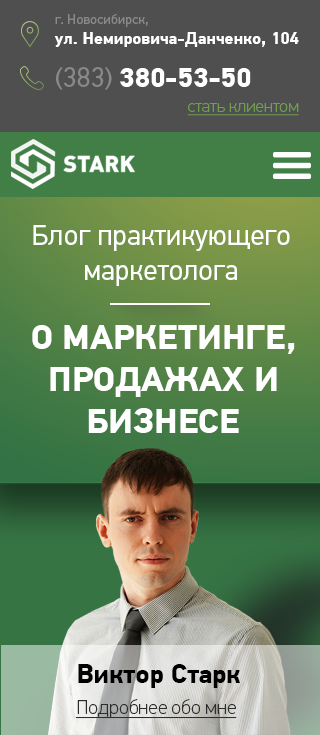
<style>
.page{position:relative;width:320px;height:735px}
.page>*{position:absolute;margin:0}
.t1{font:17px "PFDinTextPro-Bold";color:#ffffff}
.t2{font:14px "PFDinTextPro-Regular";color:#898989}
.t3{font:28px "PFDinTextPro-Bold";color:#ffffff}
.t4{font:28px "PFDinTextPro-Regular";color:#898989}
.t5{font:18px "PFDinTextPro-Thin";color:#709d4f;text-decoration:underline}
.t6{font:29.2px "PFDinTextPro-Regular";color:#ffffff}
.t7{font:35px "PFDinTextPro-Bold";color:#ffffff;text-transform:uppercase}
.t8{font:26.6px "PFDinTextPro-Bold";color:#000000}
.t9{font:20px "PFDinTextPro-Thin";color:#2d2d2d;text-decoration:underline}
</style>
<div class="page">
<p class="t1" style="left:54px;top:14px;width:245px;height:33px"><span class="t2">г. Новосибирск,<br></span>ул. Немировича-Данченко, 104</p>
<p class="t3" style="left:56px;top:67px;width:195px;height:23px"><span class="t4">(383) </span>380-53-50</p>
<p class="t5" style="left:187px;top:103px;width:112px;height:13px">стать клиентом</p>
<p class="t6" style="left:33px;top:225px;width:257px;height:61px;text-align:center">Блог практикующего маркетолога</p>
<p class="t7" style="left:32px;top:325px;width:263px;height:108px;text-align:center">о маркетинге,<br>продажах и бизнесе</p>
<p class="t8" style="left:78px;top:664px;width:162px;height:24px">Виктор Старк</p>
<p class="t9" style="left:76px;top:699px;width:161px;height:20px">Подробнее обо мне</p>
</div>
